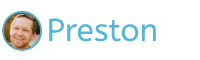
<style>
.page{position:relative;width:200px;height:60px;background:#ffffff}
.page>*{position:absolute;margin:0}
.t1{font:31.7px "ABeeZee-Regular";color:#52b5d9}
</style>
<div class="page">
<p class="t1" style="left:49px;top:18px;width:107px;height:24px">Preston</p>
</div>
